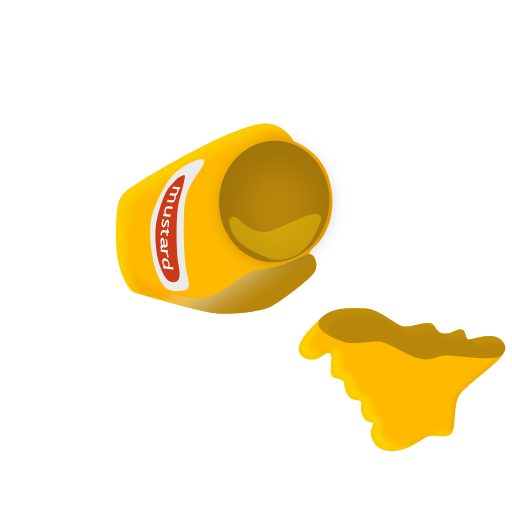
<style>
.page{position:relative;width:512px;height:512px;background:#ffffff}
.page>*{position:absolute;margin:0}
.t1{font:14.1px "LucidaGrande";letter-spacing:-0.04em;color:#ffffff;scale:1.62 1}
</style>
<div class="page">
<p class="t1" style="left:160px;top:186px;width:21px;height:84px;rotate:97deg">mustard</p>
</div>
